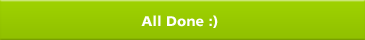
<style>
.page{position:relative;width:365px;height:40px}
.page>*{position:absolute;margin:0}
.t1{font:14px "FrutigerVCCP75Blk";color:#ffffff}
</style>
<div class="page">
<p class="t1" style="left:141px;top:15px;width:77px;height:13px">All Done :)</p>
</div>
